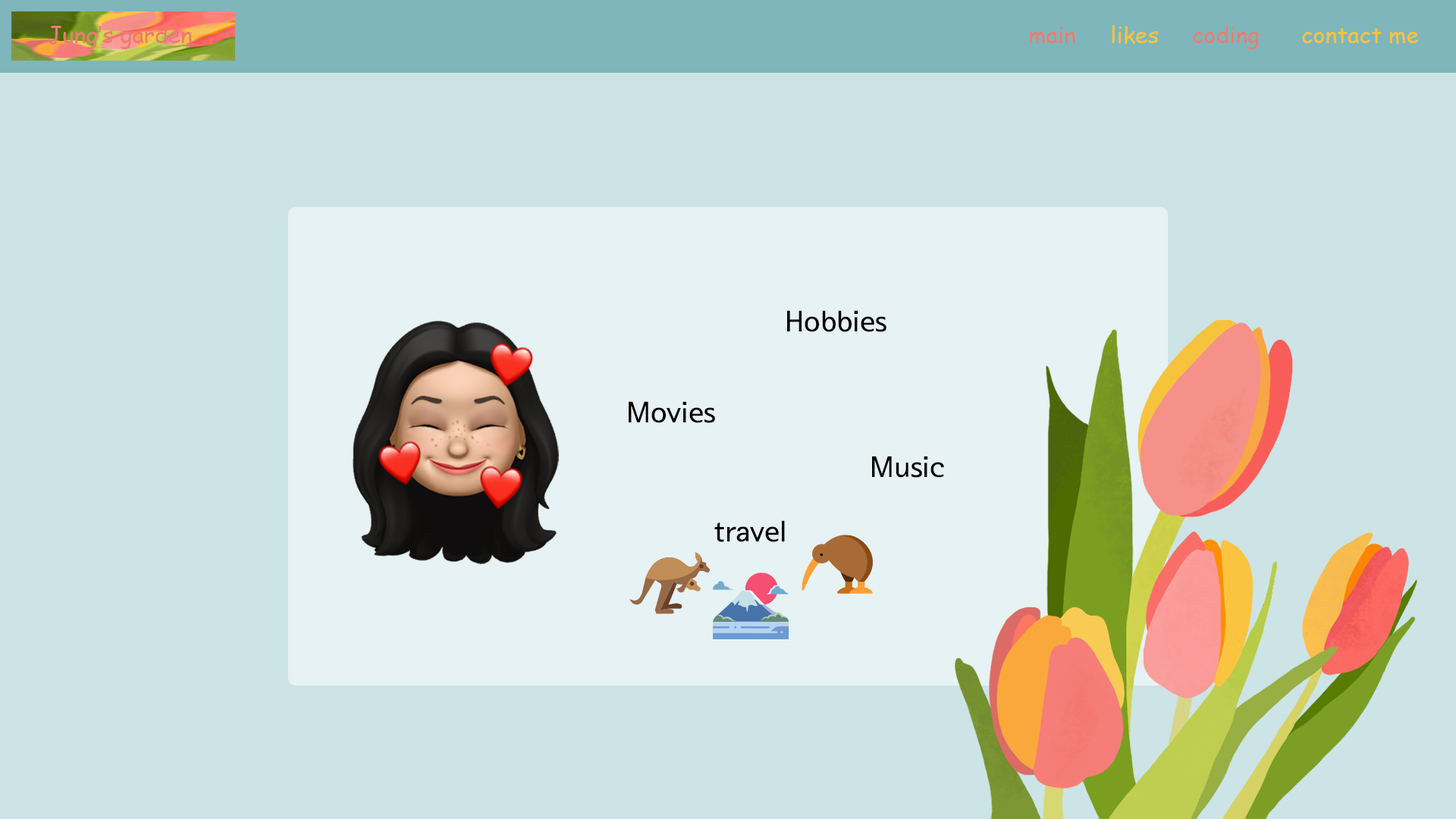
<style>
.page{position:relative;width:1456px;height:819px;background:#cce4e6}
.page>*{position:absolute;margin:0}
.t1{font:22.7px "ComicSansMS";color:#eb7c72}
.t2{font:22.7px "ComicSansMS";color:#f6c33d}
.t3{font:28.8px "SeoulNamsanB";color:#000000}
</style>
<div class="page">
<p class="t1" style="left:48px;top:25px;width:144px;height:24px">Jung’s garden</p>
<p class="t2" style="left:1029px;top:25px;width:390px;height:24px"><span class="t1">main  </span>likes  <span class="t1">coding  </span>contact me</p>
<p class="t3" style="left:787px;top:310px;width:99px;height:22px">Hobbies</p>
<p class="t3" style="left:629px;top:401px;width:86px;height:22px">Movies</p>
<p class="t3" style="left:872px;top:456px;width:72px;height:22px">Music</p>
<p class="t3" style="left:714px;top:520px;width:71px;height:22px">travel</p>
</div>
